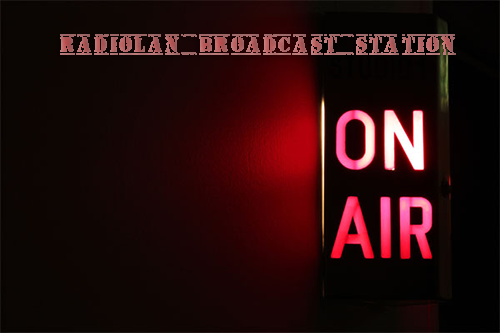
<style>
.page{position:relative;width:500px;height:333px}
.page>*{position:absolute;margin:0}
.t1{font:20px "OldStamper";color:#ae6767;font-weight:bold}
</style>
<div class="page">
<p class="t1" style="left:60px;top:34px;width:396px;height:21px">RadioLan Broadcast Station</p>
</div>
